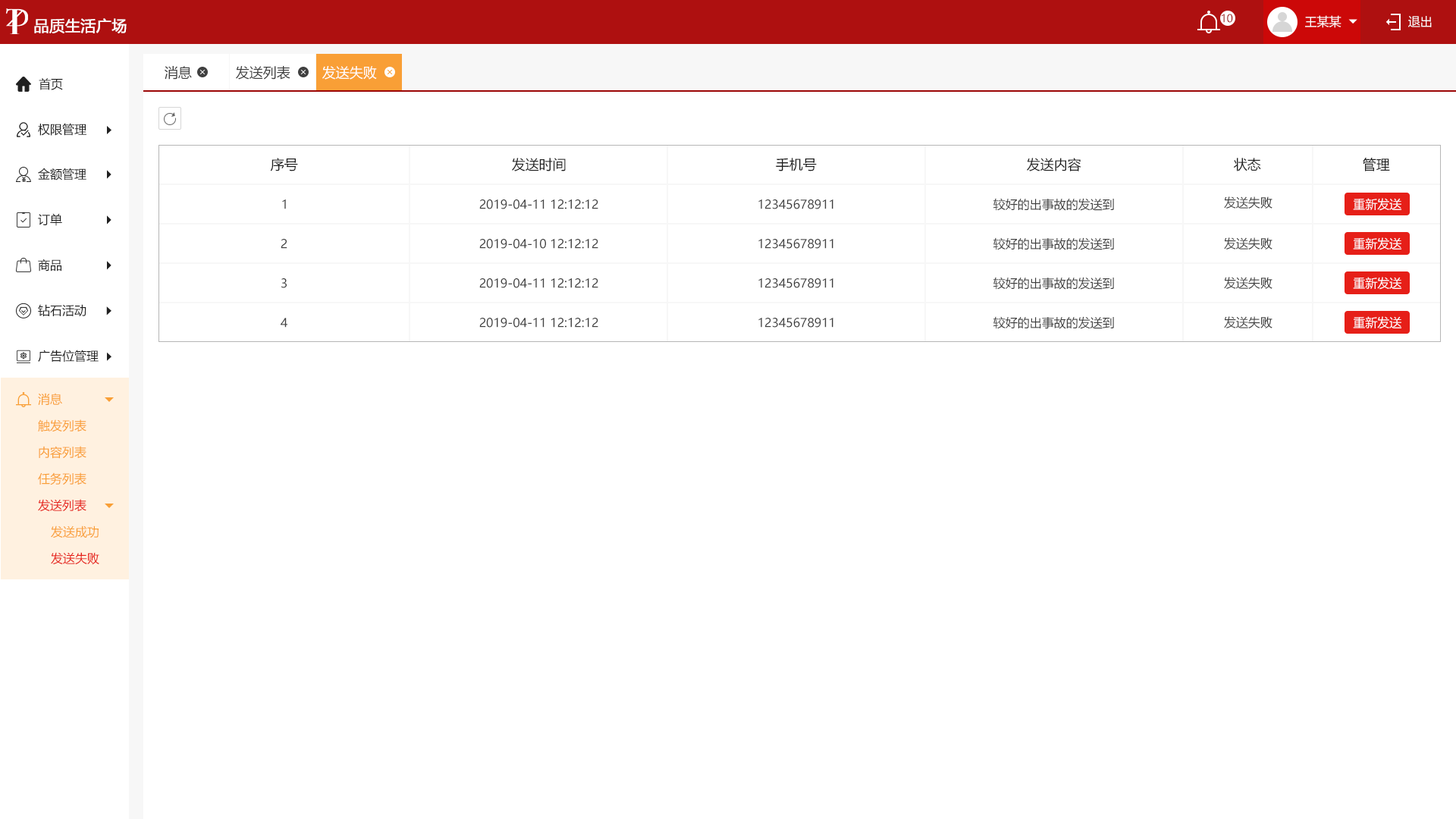
<style>
.page{position:relative;width:1456px;height:819px;background:#ffffff}
.page>*{position:absolute;margin:0}
.t1{font:10.6px "MicrosoftYaHei";color:#9c0606;text-transform:uppercase}
.t2{font:12.1px "MicrosoftYaHei";color:#ffffff;text-transform:uppercase}
.t3{font:15.2px "MicrosoftYaHei";color:#ffffff;text-transform:uppercase;font-weight:bold}
.t4{font:13.6px "MicrosoftYaHei";color:#404040;text-transform:uppercase}
.t5{font:13.6px "MicrosoftYaHei";color:#ffffff;text-transform:uppercase}
.t6{font:12.1px "MicrosoftYaHei";color:#202020;text-transform:uppercase}
.t7{font:13.6px "MicrosoftYaHei";color:#202020;text-transform:uppercase}
.t8{font:12.1px "MicrosoftYaHei";color:#404040;text-transform:uppercase}
.t9{font:12.1px "MicrosoftYaHei";color:#f99f36;text-transform:uppercase}
.t10{font:12.1px "MicrosoftYaHei";color:#e61f18;text-transform:uppercase}
</style>
<div class="page">
<p class="t1" style="left:1222px;top:14px;width:11px;height:9px">10</p>
<p class="t2" style="left:1305px;top:15px;width:36px;height:13px">王某某</p>
<p class="t2" style="left:1408px;top:16px;width:24px;height:11px">退出</p>
<p class="t3" style="left:34px;top:18px;width:93px;height:15px">品质生活广场</p>
<p class="t4" style="left:165px;top:66px;width:27px;height:14px">消息</p>
<p class="t4" style="left:236px;top:66px;width:54px;height:14px">发送列表</p>
<p class="t5" style="left:322px;top:66px;width:55px;height:14px">发送失败</p>
<p class="t6" style="left:39px;top:78px;width:24px;height:12px">首页</p>
<p class="t6" style="left:38px;top:123px;width:48px;height:13px">权限管理</p>
<p class="t7" style="left:270px;top:158px;width:28px;height:13px">序号</p>
<p class="t7" style="left:512px;top:158px;width:54px;height:13px">发送时间</p>
<p class="t7" style="left:776px;top:158px;width:41px;height:13px">手机号</p>
<p class="t7" style="left:1027px;top:158px;width:54px;height:13px">发送内容</p>
<p class="t7" style="left:1233px;top:158px;width:28px;height:13px">状态</p>
<p class="t7" style="left:1363px;top:158px;width:27px;height:13px">管理</p>
<p class="t6" style="left:38px;top:168px;width:48px;height:12px">金额管理</p>
<p class="t8" style="left:993px;top:198px;width:121px;height:13px">较好的出事故的发送到</p>
<p class="t8" style="left:1224px;top:196px;width:48px;height:13px">发送失败</p>
<p class="t2" style="left:1353px;top:198px;width:49px;height:13px">重新发送</p>
<p class="t8" style="left:282px;top:199px;width:4px;height:10px">1</p>
<p class="t8" style="left:479px;top:199px;width:119px;height:10px">2019-04-11 12:12:12</p>
<p class="t8" style="left:758px;top:199px;width:75px;height:10px">12345678911</p>
<p class="t6" style="left:38px;top:213px;width:24px;height:13px">订单</p>
<p class="t8" style="left:281px;top:239px;width:6px;height:10px">2</p>
<p class="t8" style="left:479px;top:239px;width:119px;height:10px">2019-04-10 12:12:12</p>
<p class="t8" style="left:758px;top:239px;width:75px;height:10px">12345678911</p>
<p class="t8" style="left:993px;top:237px;width:121px;height:13px">较好的出事故的发送到</p>
<p class="t8" style="left:1224px;top:237px;width:48px;height:12px">发送失败</p>
<p class="t2" style="left:1353px;top:237px;width:49px;height:13px">重新发送</p>
<p class="t6" style="left:38px;top:259px;width:23px;height:12px">商品</p>
<p class="t8" style="left:281px;top:278px;width:6px;height:10px">3</p>
<p class="t8" style="left:479px;top:278px;width:119px;height:10px">2019-04-11 12:12:12</p>
<p class="t8" style="left:758px;top:278px;width:75px;height:10px">12345678911</p>
<p class="t8" style="left:993px;top:277px;width:121px;height:13px">较好的出事故的发送到</p>
<p class="t8" style="left:1224px;top:277px;width:48px;height:12px">发送失败</p>
<p class="t2" style="left:1353px;top:277px;width:49px;height:13px">重新发送</p>
<p class="t6" style="left:38px;top:304px;width:48px;height:12px">钻石活动</p>
<p class="t8" style="left:281px;top:318px;width:6px;height:10px">4</p>
<p class="t8" style="left:479px;top:318px;width:119px;height:10px">2019-04-11 12:12:12</p>
<p class="t8" style="left:758px;top:318px;width:75px;height:10px">12345678911</p>
<p class="t8" style="left:993px;top:316px;width:121px;height:13px">较好的出事故的发送到</p>
<p class="t8" style="left:1224px;top:316px;width:48px;height:12px">发送失败</p>
<p class="t2" style="left:1353px;top:316px;width:49px;height:13px">重新发送</p>
<p class="t6" style="left:38px;top:350px;width:61px;height:12px">广告位管理</p>
<p class="t9" style="left:38px;top:393px;width:24px;height:12px">消息</p>
<p class="t9" style="left:38px;top:419px;width:48px;height:12px">触发列表</p>
<p class="t9" style="left:39px;top:446px;width:47px;height:13px">内容列表</p>
<p class="t9" style="left:38px;top:472px;width:48px;height:13px">任务列表</p>
<p class="t10" style="left:38px;top:499px;width:48px;height:12px">发送列表</p>
<p class="t9" style="left:51px;top:526px;width:48px;height:12px">发送成功</p>
<p class="t10" style="left:51px;top:552px;width:48px;height:13px">发送失败</p>
</div>
